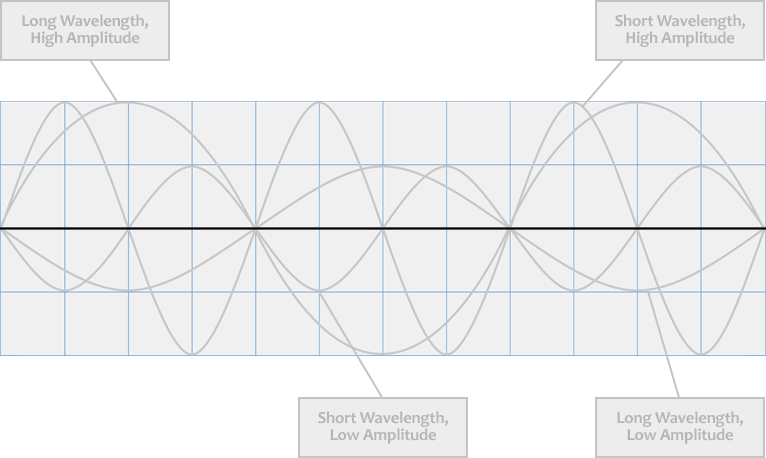
<style>
.page{position:relative;width:766px;height:458px;background:#f0f0f0}
.page>*{position:absolute;margin:0}
.t1{font:16.7px/16.7px "Candara-Bold";letter-spacing:-0.01em;color:#b6b6b6}
</style>
<div class="page">
<p class="t1" style="left:22px;top:14px;width:126px;height:33px;text-align:center">Long Wavelength,<br>High Amplitude</p>
<p class="t1" style="left:615px;top:14px;width:130px;height:33px;text-align:center">Short Wavelength,<br>High Amplitude</p>
<p class="t1" style="left:318px;top:411px;width:130px;height:33px;text-align:center">Short Wavelength,<br>Low Amplitude</p>
<p class="t1" style="left:617px;top:411px;width:126px;height:33px;text-align:center">Long Wavelength,<br>Low Amplitude</p>
</div>
